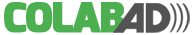
<style>
.page{position:relative;width:194px;height:35px;background:#ffffff}
.page>*{position:absolute;margin:0}
.t1{font:40.5px "Exo-Black";letter-spacing:-0.05em;color:#4caf50;text-transform:uppercase;font-weight:bold}
</style>
<div class="page">
<p class="t1" style="left:4px;top:2px;width:121px;height:31px">colab</p>
</div>
